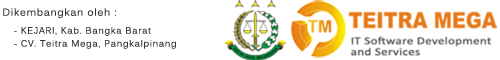
<style>
.page{position:relative;width:500px;height:60px;background:#ffffff}
.page>*{position:absolute;margin:0}
.t1{font:10px "Kalinga";letter-spacing:0.075em;color:#373434}
.t2{font:9px "Kalinga";letter-spacing:0.075em;color:#373434}
</style>
<div class="page">
<p class="t1" style="left:3px;top:8px;width:113px;height:11px">Dikembangkan oleh :</p>
<p class="t2" style="left:14px;top:27px;width:137px;height:9px">- KEJARI, Kab. Bangka Barat</p>
<p class="t2" style="left:14px;top:40px;width:162px;height:9px">- CV. Teitra Mega, Pangkalpinang</p>
</div>
